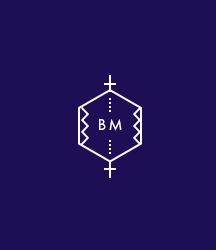
<style>
.page{position:relative;width:216px;height:250px;background:#1d0e56}
.page>*{position:absolute;margin:0}
.t1{font:16.4px "FuturaPT-Book";color:#ffffff}
.t2{font:16px "FuturaPT-Book";color:#ffffff}
</style>
<div class="page">
<p class="t1" style="left:99px;top:119px;width:7px;height:11px">B</p>
<p class="t2" style="left:109px;top:119px;width:13px;height:12px">M</p>
</div>
